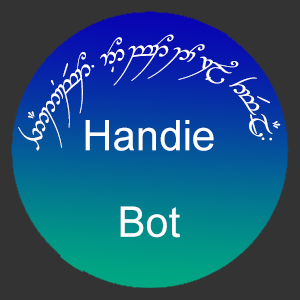
<style>
.page{position:relative;width:300px;height:300px;background:#333333}
.page>*{position:absolute;margin:0}
.t1{font:42px "TengwarAnnatar-Italic";color:#ffffff}
.t2{font:72px "ArialMT";color:#ffffff}
</style>
<div class="page">
<p class="t1" style="left:18px;top:34px;width:263px;height:117px;text-align:center">95#2`Bw$1Y= 5^È w1Y 1`N 7j&amp;È 3t$ j#"-</p>
<p class="t2" style="left:85px;top:120px;width:129px;height:118px;text-align:center">Handie<br>Bot</p>
</div>
